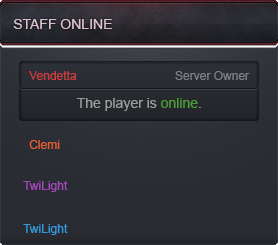
<style>
.page{position:relative;width:278px;height:245px}
.page>*{position:absolute;margin:0}
.t1{font:14px "ArialMT";color:#dac1c9}
.t2{font:12px "ArialMT";color:#cd3d3d}
.t3{font:12px "ArialMT";color:#7c7f88}
.t4{font:14px "ArialMT";color:#9a9a9a}
.t5{font:14px "ArialMT";color:#4d9b38}
.t6{font:12px "ArialMT";color:#e06034}
.t7{font:12px "ArialMT";color:#a348ba}
.t8{font:12px "ArialMT";color:#3298d9}
</style>
<div class="page">
<p class="t1" style="left:13px;top:19px;width:99px;height:10px">STAFF ONLINE</p>
<p class="t2" style="left:29px;top:71px;width:48px;height:9px">Vendetta</p>
<p class="t3" style="left:175px;top:71px;width:75px;height:9px">Server Owner</p>
<p class="t4" style="left:76px;top:98px;width:125px;height:13px">The player is <span class="t5">online</span>.</p>
<p class="t6" style="left:29px;top:140px;width:31px;height:9px">Clemi</p>
<p class="t7" style="left:23px;top:181px;width:45px;height:11px">TwiLight</p>
<p class="t8" style="left:23px;top:224px;width:45px;height:11px">TwiLight</p>
</div>
